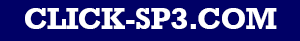
<style>
.page{position:relative;width:300px;height:41px;background:#000066}
.page>*{position:absolute;margin:0}
.t1{font:27.8px "Rockwell-Bold";color:#ffffff;text-transform:uppercase}
</style>
<div class="page">
<p class="t1" style="left:25px;top:8px;width:252px;height:21px">CLICK-SP3.COM</p>
</div>
